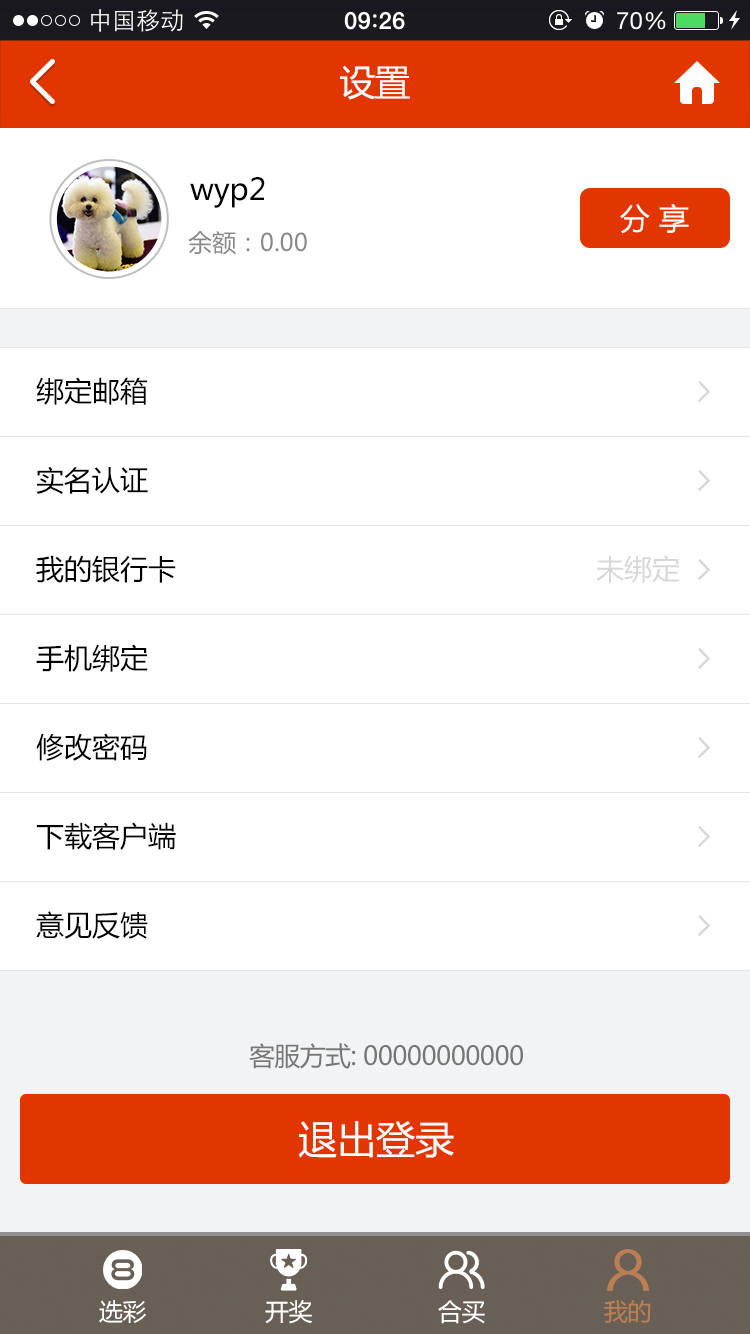
<style>
.page{position:relative;width:750px;height:1334px;background:#ffffff}
.page>*{position:absolute;margin:0}
.t1{font:36px "MicrosoftYaHei";letter-spacing:-0.025em;color:#ffffff}
.t2{font:30px "MicrosoftYaHei";color:#000000}
.t3{font:30px "MicrosoftYaHei";color:#ffffff}
.t4{font:24px "MicrosoftYaHei";color:#888888}
.t5{font:28px "MicrosoftYaHei";color:#000000}
.t6{font:28px "MicrosoftYaHei";color:#d7d7d7}
.t7{font:26px "MicrosoftYaHei";letter-spacing:-0.025em;color:#767676}
.t8{font:39px "MicrosoftYaHei";color:#ffffff}
.t9{font:24px "MicrosoftYaHei";letter-spacing:-0.025em;color:#ffffff}
.t10{font:24px "MicrosoftYaHei";letter-spacing:-0.025em;color:#bc7e53}
</style>
<div class="page">
<p class="t1" style="left:340px;top:65px;width:70px;height:35px">设置</p>
<p class="t2" style="left:190px;top:177px;width:75px;height:31px">wyp2</p>
<p class="t3" style="left:620px;top:203px;width:69px;height:31px">分 享</p>
<p class="t4" style="left:188px;top:231px;width:119px;height:24px">余额：0.00</p>
<p class="t5" style="left:36px;top:377px;width:112px;height:28px">绑定邮箱</p>
<p class="t5" style="left:36px;top:466px;width:112px;height:28px">实名认证</p>
<p class="t5" style="left:36px;top:555px;width:140px;height:28px">我的银行卡</p>
<p class="t6" style="left:596px;top:555px;width:84px;height:28px">未绑定</p>
<p class="t5" style="left:36px;top:644px;width:112px;height:28px">手机绑定</p>
<p class="t5" style="left:36px;top:733px;width:111px;height:28px">修改密码</p>
<p class="t5" style="left:36px;top:822px;width:140px;height:28px">下载客户端</p>
<p class="t5" style="left:36px;top:911px;width:112px;height:28px">意见反馈</p>
<p class="t7" style="left:249px;top:1043px;width:274px;height:26px">客服方式: 00000000000</p>
<p class="t8" style="left:298px;top:1121px;width:156px;height:37px">退出登录</p>
<p class="t9" style="left:99px;top:1300px;width:47px;height:23px">选彩</p>
<p class="t9" style="left:265px;top:1300px;width:48px;height:24px">开奖</p>
<p class="t9" style="left:438px;top:1300px;width:47px;height:24px">合买</p>
<p class="t10" style="left:604px;top:1300px;width:47px;height:23px">我的</p>
</div>
